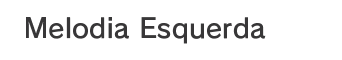
<style>
.page{position:relative;width:342px;height:60px;background:#ffffff}
.page>*{position:absolute;margin:0}
.t1{font:26.7px "RodinPro-DB";letter-spacing:0.008em;color:#383738}
</style>
<div class="page">
<p class="t1" style="left:26px;top:17px;width:240px;height:27px">Melodia Esquerda</p>
</div>
